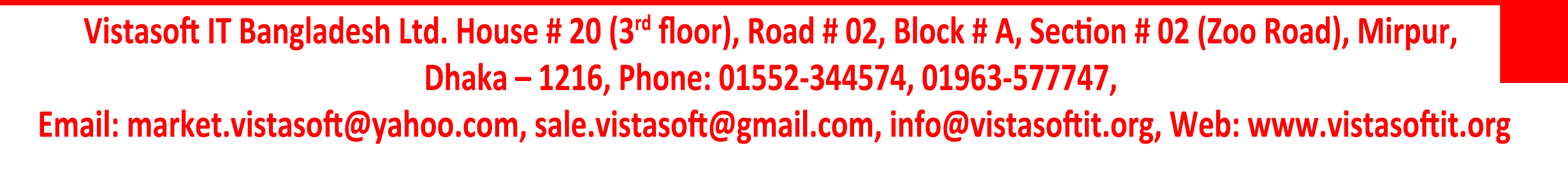
<style>
.page{position:relative;width:1568px;height:171px;background:#ffffff}
.page>*{position:absolute;margin:0}
.t1{font:39.7px/46.7px "Calibri-Bold";color:#ff0000;scale:0.8 1}
</style>
<div class="page">
<p class="t1" style="left:40px;top:14px;width:1471px;height:130px;text-align:center">Vistasoft IT Bangladesh Ltd. House # 20 (3rd floor), Road # 02, Block # A, Section # 02 (Zoo Road), Mirpur, <br>Dhaka – 1216, Phone: 01552-344574, 01963-577747, <br>Email: market.vistasoft@yahoo.com, sale.vistasoft@gmail.com, info@vistasoftit.org, Web: www.vistasoftit.org</p>
</div>
